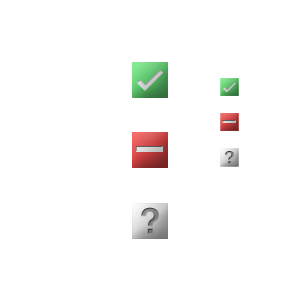
<style>
.page{position:relative;width:300px;height:300px;background:#ffffff}
.page>*{position:absolute;margin:0}
.t1{font:30px "DevanagariMT-Bold";color:#c6c6c6;font-weight:bold}
.t2{font:15px "DevanagariMT-Bold";color:#c8c8c8;font-weight:bold}
.t3{font:18px "Helvetica-Bold"}
.t4{font:36px "Helvetica-Bold"}
</style>
<div class="page">
<p class="t1" style="left:136px;top:70px;width:27px;height:21px">✓</p>
<p class="t2" style="left:222px;top:82px;width:14px;height:11px">✓</p>
<p class="t3" style="left:225px;top:151px;width:9px;height:13px">?</p>
<p class="t4" style="left:141px;top:207px;width:18px;height:27px">?</p>
</div>
